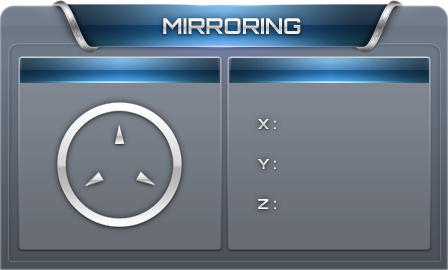
<style>
.page{position:relative;width:448px;height:270px}
.page>*{position:absolute;margin:0}
.t1{font:22px "Orbitron-Bold";text-transform:uppercase}
.t2{font:14px "Orbitron-Bold";color:#ececec;text-transform:uppercase}
.t3{font:14px "Orbitron-Bold";color:#ffffff;text-transform:uppercase}
</style>
<div class="page">
<p class="t1" style="left:163px;top:18px;width:138px;height:16px">mirroring</p>
<p class="t2" style="left:258px;top:119px;width:18px;height:10px">x :</p>
<p class="t3" style="left:258px;top:159px;width:18px;height:10px">y :</p>
<p class="t3" style="left:258px;top:199px;width:18px;height:10px">z :</p>
</div>
